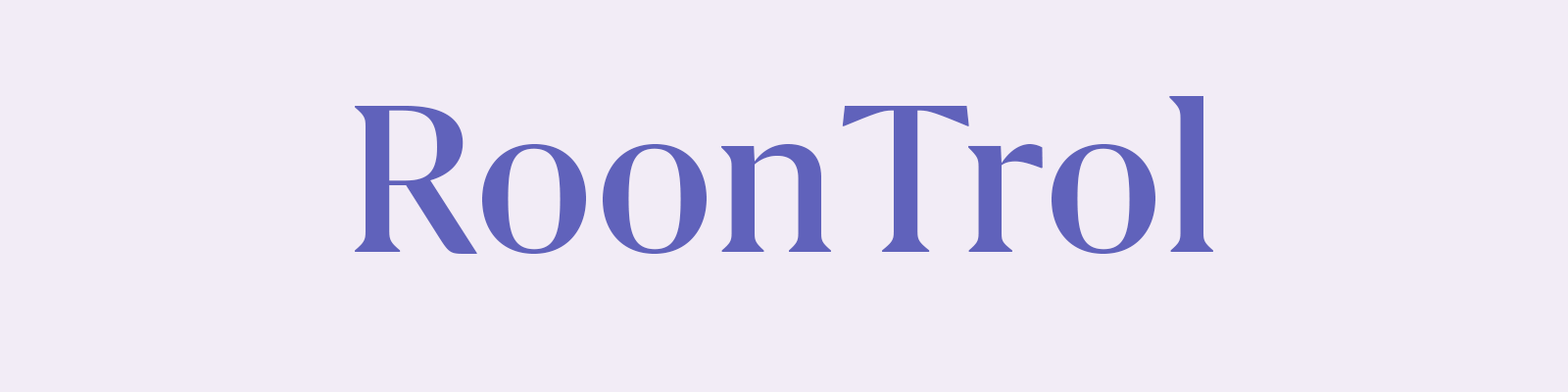
<style>
.page{position:relative;width:1568px;height:392px;background:#f2ecf6}
.page>*{position:absolute;margin:0}
.t1{font:243.7px "GrifoM-Medium";color:#6062bb}
</style>
<div class="page">
<p class="t1" style="left:355px;top:96px;width:858px;height:158px">RoonTrol</p>
</div>
